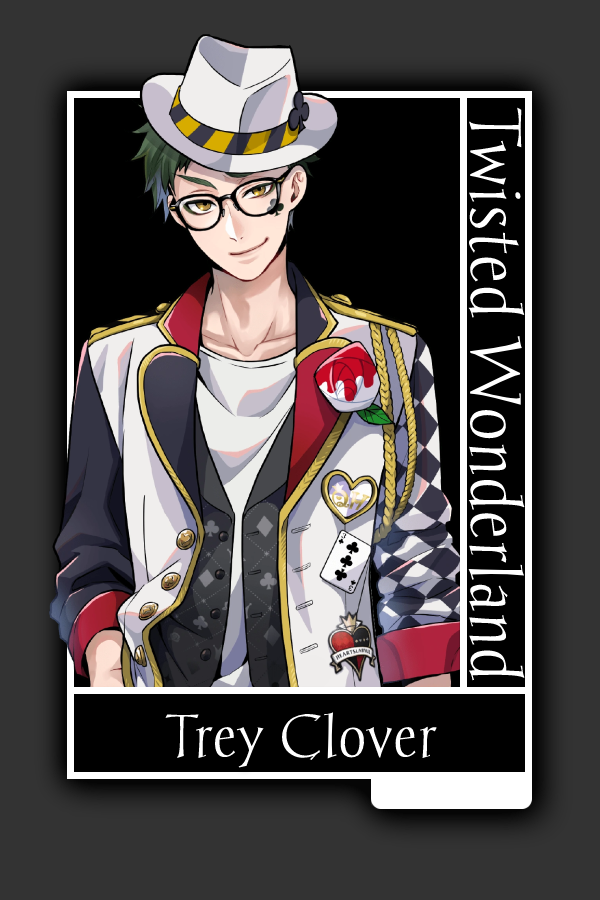
<style>
.page{position:relative;width:600px;height:900px;background:#333333}
.page>*{position:absolute;margin:0}
.t1{font:60px "Chantelli-Antiqua";color:#ffffff}
.t2{font:50px "Chantelli-Antiqua";color:#ffffff}
</style>
<div class="page">
<p class="t1" style="left:468px;top:107px;width:57px;height:574px;rotate:90deg">Twisted Wonderland</p>
<p class="t2" style="left:165px;top:712px;width:272px;height:56px">Trey Clover</p>
</div>
